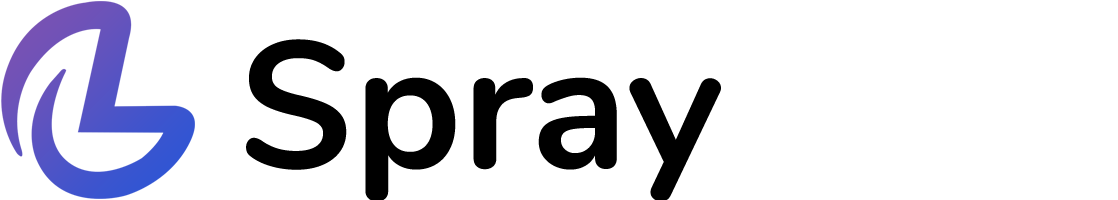
<style>
.page{position:relative;width:1118px;height:200px;background:#ffffff}
.page>*{position:absolute;margin:0}
.t1{font:180px "Nunito-Bold";color:#000000}
</style>
<div class="page">
<p class="t1" style="left:246px;top:39px;width:475px;height:163px">Spray</p>
</div>
